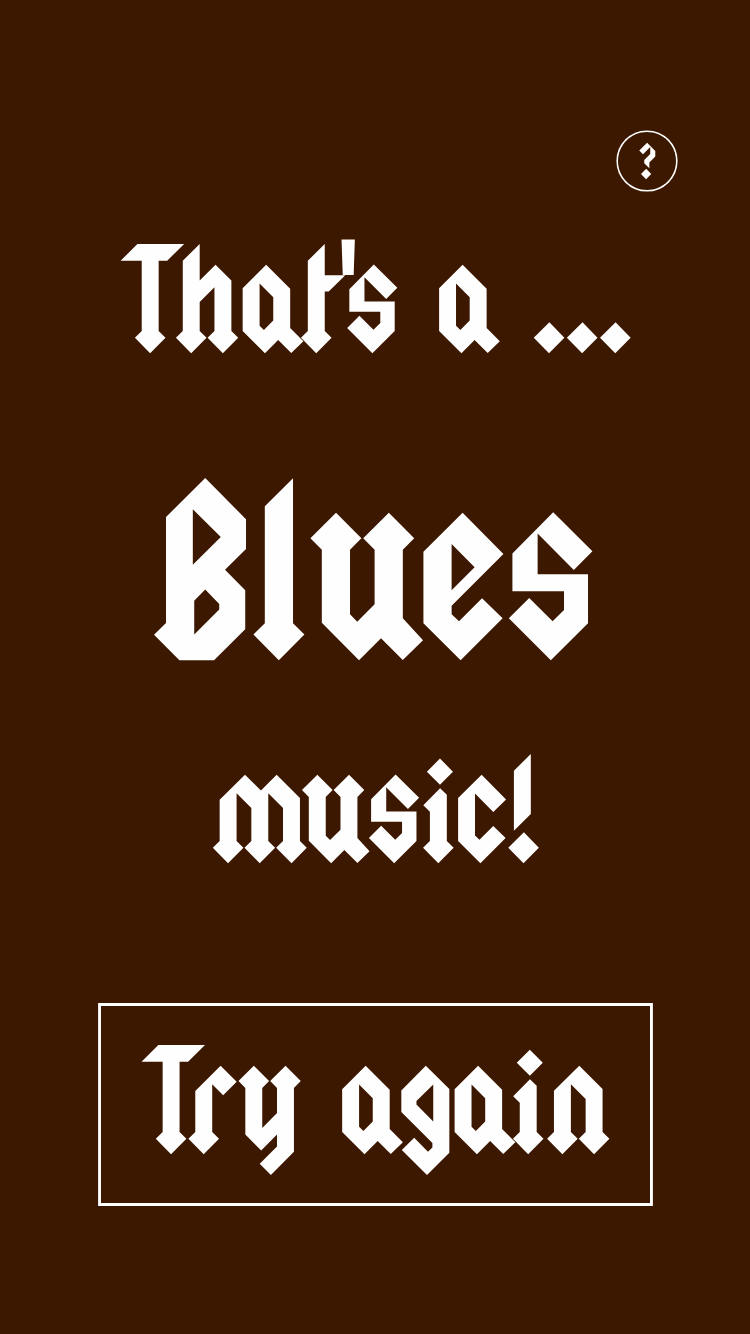
<style>
.page{position:relative;width:750px;height:1334px;background:#3d1800}
.page>*{position:absolute;margin:0}
.t1{font:40px "Squealer";color:#fffefe}
.t2{font:120px "Squealer";color:#fffefe}
.t3{font:200px "Squealer";color:#fffefe}
</style>
<div class="page">
<p class="t1" style="left:639px;top:142px;width:17px;height:38px">?</p>
<p class="t2" style="left:120px;top:239px;width:511px;height:115px">That's a ...</p>
<p class="t3" style="left:154px;top:477px;width:439px;height:184px">Blues</p>
<p class="t2" style="left:212px;top:753px;width:327px;height:111px">music!</p>
<p class="t2" style="left:141px;top:1044px;width:469px;height:132px">Try again</p>
</div>
